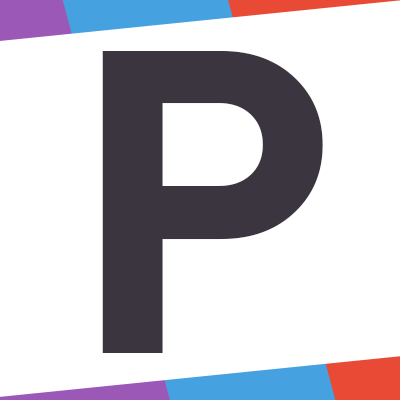
<style>
.page{position:relative;width:400px;height:400px;background:#ffffff}
.page>*{position:absolute;margin:0}
.t1{font:422.8px "DINBoldAlternate";letter-spacing:-0.01em;color:#3a353e}
</style>
<div class="page">
<p class="t1" style="left:102px;top:51px;width:221px;height:302px">P</p>
</div>
